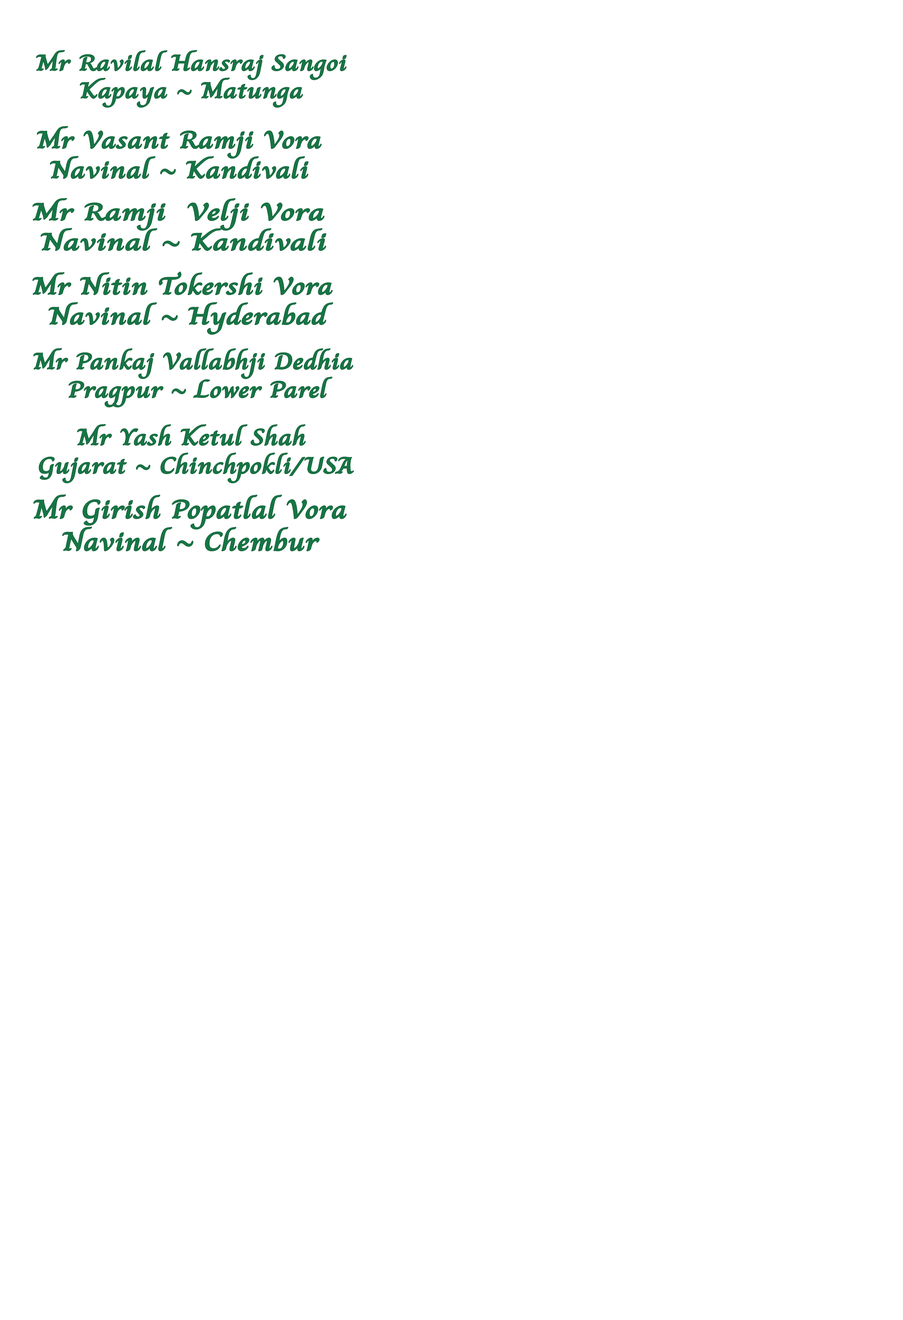
<style>
.page{position:relative;width:903px;height:1320px;background:#ffffff}
.page>*{position:absolute;margin:0}
.t1{font:23px "Charm-Bold";color:#167544;scale:1.3 1}
.t2{font:25px "Charm-Bold";color:#167544;scale:1.3 1}
.t3{font:25px "Charm-Bold";color:#167544;scale:1.43 1}
.t4{font:24.9px "Charm-Bold";color:#167544;scale:1.33 1}
.t5{font:23.6px "Charm-Bold";color:#167544;scale:1.26 1}
.t6{font:26.9px "Charm-Bold";color:#167544;scale:1.26 1}
</style>
<div class="page">
<p class="t1" style="left:36px;top:50px;width:310px;height:57px;text-align:center">Mr Ravilal Hansraj Sangoi<br>Kapaya ~ Matunga</p>
<p class="t2" style="left:37px;top:126px;width:284px;height:53px;text-align:center">Mr Vasant Ramji Vora<br>Navinal ~ Kandivali</p>
<p class="t3" style="left:33px;top:198px;width:293px;height:53px;text-align:center">Mr Ramji  Velji Vora <br>Navinal ~ Kandivali</p>
<p class="t4" style="left:33px;top:272px;width:300px;height:63px;text-align:center">Mr Nitin Tokershi Vora <br>Navinal ~ Hyderabad</p>
<p class="t5" style="left:33px;top:348px;width:320px;height:59px;text-align:center">Mr Pankaj Vallabhji Dedhia <br>Pragpur ~ Lower Parel</p>
<p class="t5" style="left:39px;top:424px;width:315px;height:59px;text-align:center">Mr Yash Ketul Shah <br>Gujarat ~ Chinchpokli/USA</p>
<p class="t6" style="left:34px;top:494px;width:312px;height:57px;text-align:center">Mr Girish Popatlal Vora<br>Navinal ~ Chembur</p>
</div>
